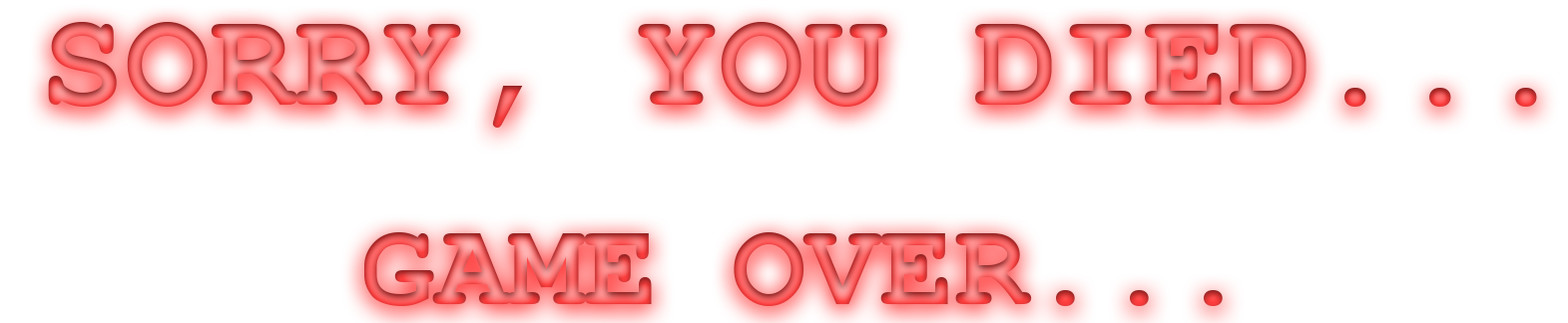
<style>
.page{position:relative;width:1568px;height:323px;background:#ffffff}
.page>*{position:absolute;margin:0}
.t1{font:141.5px "CourierNewPS-BoldMT"}
.t2{font:123.5px "CourierNewPS-BoldMT"}
</style>
<div class="page">
<p class="t1" style="left:48px;top:22px;width:1489px;height:106px">SORRY, YOU DIED...</p>
<p class="t2" style="left:364px;top:233px;width:859px;height:73px">GAME OVER...</p>
</div>
